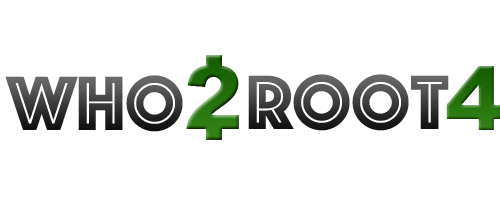
<style>
.page{position:relative;width:500px;height:200px;background:#ffffff}
.page>*{position:absolute;margin:0}
.t1{font:80px "Phosphate-Inline"}
.t2{font:88px "Arial-Black";color:#297410}
</style>
<div class="page">
<p class="t1" style="left:5px;top:75px;width:178px;height:57px">Who</p>
<p class="t1" style="left:248px;top:74px;width:201px;height:57px">Root</p>
<p class="t2" style="left:446px;top:66px;width:56px;height:64px">4</p>
</div>
